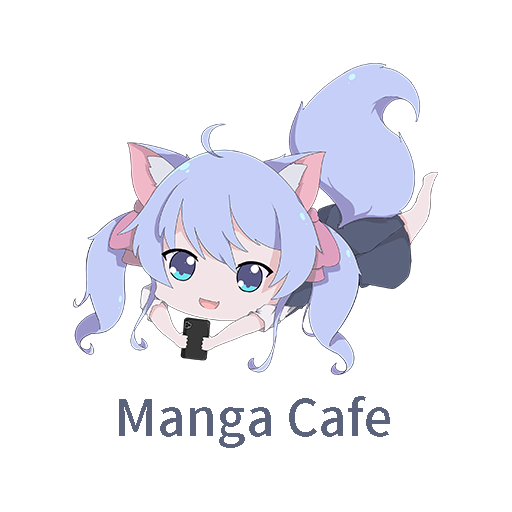
<style>
.page{position:relative;width:512px;height:512px;background:#ffffff}
.page>*{position:absolute;margin:0}
.t1{font:50px "NotoSansCJKtc-Medium";color:#5b627b}
</style>
<div class="page">
<p class="t1" style="left:119px;top:396px;width:271px;height:52px">Manga Cafe</p>
</div>
